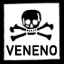
<style>
.page{position:relative;width:64px;height:64px;background:#ffffff}
.page>*{position:absolute;margin:0}
.t1{font:14px "DINNextLTPro-Regular";color:#000000;text-transform:uppercase;font-weight:bold}
</style>
<div class="page">
<p class="t1" style="left:6px;top:45px;width:51px;height:11px">VENENO</p>
</div>
